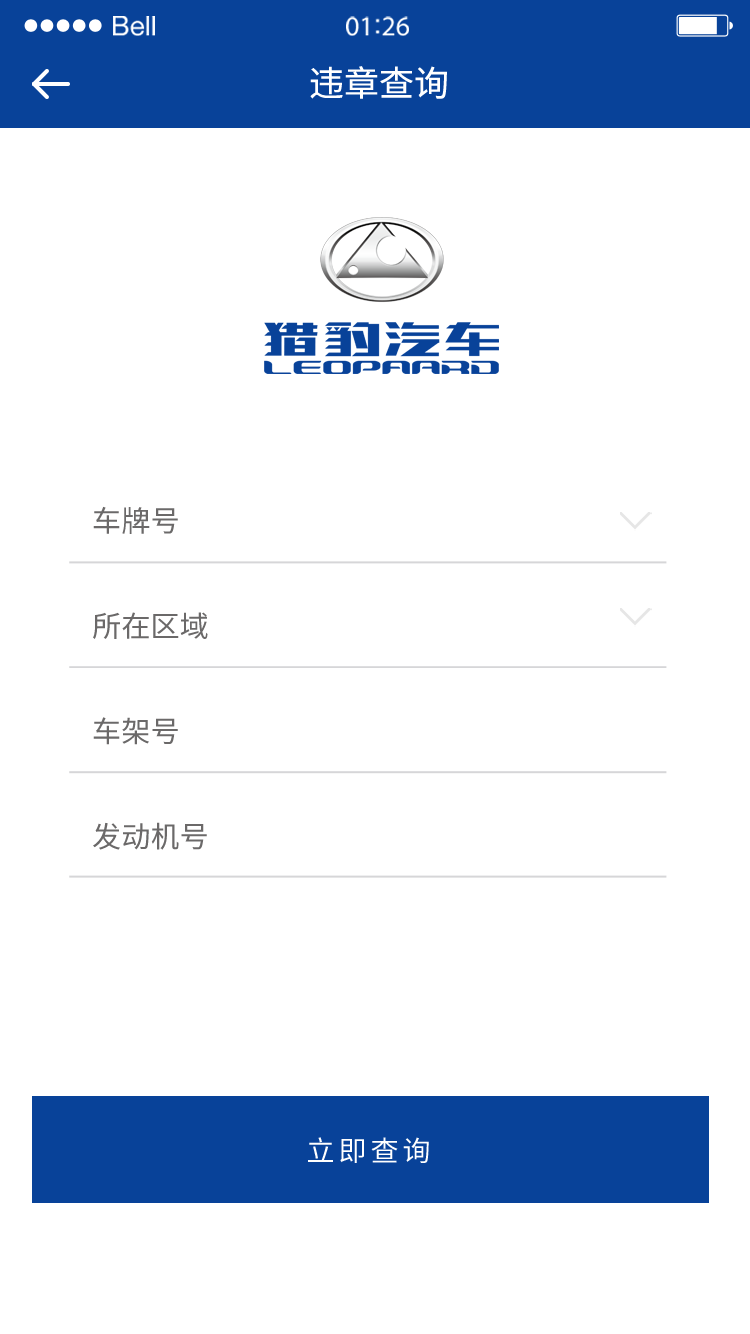
<style>
.page{position:relative;width:750px;height:1334px;background:#ffffff}
.page>*{position:absolute;margin:0}
.t1{font:35px "SourceHanSansCN-Regular";color:#ffffff}
.t2{font:29.2px/105.3px "SourceHanSansCN-Regular";color:#595757}
.t3{font:28.1px "SourceHanSansCN-Regular";letter-spacing:0.14em;color:#ffffff}
</style>
<div class="page">
<p class="t1" style="left:310px;top:66px;width:137px;height:33px">违章查询</p>
<p class="t2" style="left:93px;top:506px;width:115px;height:344px;opacity:0.89">车牌号<br>所在区域<br>车架号<br>发动机号</p>
<p class="t3" style="left:308px;top:1137px;width:121px;height:26px">立即查询</p>
</div>
